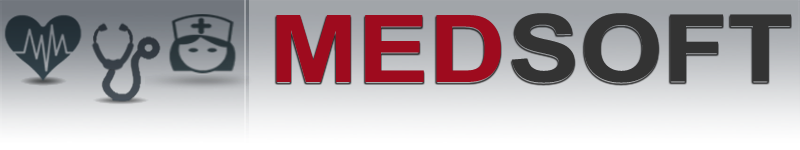
<style>
.page{position:relative;width:800px;height:150px}
.page>*{position:absolute;margin:0}
.t1{font:93.1px "Arial-BoldMT";color:#9e0b1e;scale:1.15 1}
.t2{font:93.1px "Arial-BoldMT";color:#333333;scale:1.15 1}
</style>
<div class="page">
<p class="t1" style="left:276px;top:15px;width:225px;height:67px">MED</p>
<p class="t2" style="left:512px;top:13px;width:279px;height:70px">SOFT</p>
</div>
